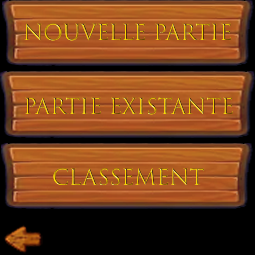
<style>
.page{position:relative;width:255px;height:255px;background:#000000}
.page>*{position:absolute;margin:0}
.t1{font:21.2px "TrajanColor-Concept"}
</style>
<div class="page">
<p class="t1" style="left:24px;top:23px;width:207px;height:18px">Nouvelle Partie</p>
<p class="t1" style="left:25px;top:97px;width:208px;height:18px">Partie Existante</p>
<p class="t1" style="left:53px;top:168px;width:151px;height:18px">Classement</p>
</div>
